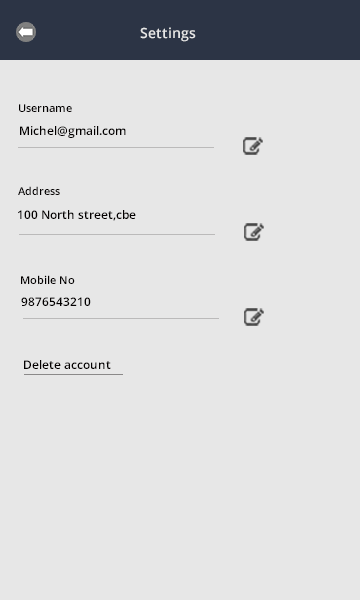
<style>
.page{position:relative;width:360px;height:600px;background:#e7e7e7}
.page>*{position:absolute;margin:0}
.t1{font:14px "OpenSans-Semibold";color:#e7e7e7}
.t2{font:11px "OpenSans-Semibold";color:#030000}
.t3{font:12px "OpenSans-Semibold";color:#030000}
</style>
<div class="page">
<p class="t1" style="left:140px;top:27px;width:56px;height:15px">Settings</p>
<p class="t2" style="left:19px;top:104px;width:53px;height:8px">Username</p>
<p class="t3" style="left:20px;top:126px;width:106px;height:12px">Michel@gmail.com</p>
<p class="t2" style="left:18px;top:186px;width:42px;height:9px">Address</p>
<p class="t3" style="left:18px;top:210px;width:118px;height:11px">100 North street,cbe</p>
<p class="t2" style="left:21px;top:275px;width:54px;height:9px">Mobile No</p>
<p class="t3" style="left:21px;top:297px;width:70px;height:9px">9876543210</p>
<p class="t3" style="left:24px;top:360px;width:87px;height:9px">Delete account</p>
</div>
